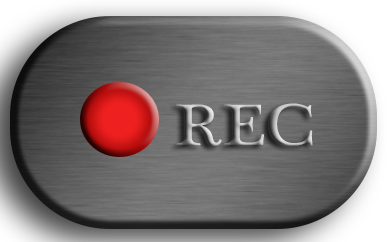
<style>
.page{position:relative;width:390px;height:242px}
.page>*{position:absolute;margin:0}
.t1{font:60px "PlantagenetCherokee";letter-spacing:-0.005em;scale:1.2 1}
</style>
<div class="page">
<p class="t1" style="left:175px;top:103px;width:138px;height:43px">REC</p>
</div>
